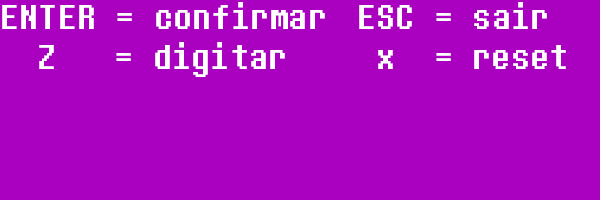
<style>
.page{position:relative;width:600px;height:200px;background:#a901bf}
.page>*{position:absolute;margin:0}
.t1{font:36px "DeterminationMono";color:#ffffff;scale:0.89 1}
</style>
<div class="page">
<p class="t1" style="left:2px;top:2px;width:323px;height:27px">ENTER = confirmar</p>
<p class="t1" style="left:359px;top:2px;width:188px;height:27px">ESC = sair</p>
<p class="t1" style="left:39px;top:42px;width:246px;height:35px">Z   = digitar</p>
<p class="t1" style="left:378px;top:45px;width:188px;height:24px">x  = reset</p>
</div>
